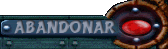
<style>
.page{position:relative;width:168px;height:49px;background:#ffffff}
.page>*{position:absolute;margin:0}
.t1{font:16px "BalderLL"}
</style>
<div class="page">
<p class="t1" style="left:14px;top:20px;width:102px;height:14px">ABANDONAR</p>
</div>
